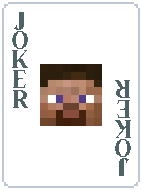
<style>
.page{position:relative;width:142px;height:190px;background:#ffffff}
.page>*{position:absolute;margin:0}
.t1{font:26px "StarCrushRegular";color:#4f6367}
</style>
<div class="page">
<p class="t1" style="left:13px;top:11px;width:12px;height:19px">J</p>
<p class="t1" style="left:12px;top:30px;width:16px;height:19px">O</p>
<p class="t1" style="left:12px;top:49px;width:16px;height:19px">K</p>
<p class="t1" style="left:13px;top:69px;width:13px;height:19px">E</p>
<p class="t1" style="left:13px;top:89px;width:15px;height:19px">R</p>
<p class="t1" style="left:115px;top:80px;width:15px;height:18px;rotate:180deg">R</p>
<p class="t1" style="left:117px;top:100px;width:13px;height:18px;rotate:180deg">E</p>
<p class="t1" style="left:115px;top:120px;width:16px;height:18px;rotate:180deg">K</p>
<p class="t1" style="left:115px;top:139px;width:16px;height:18px;rotate:180deg">O</p>
<p class="t1" style="left:119px;top:158px;width:10px;height:18px;rotate:180deg">J</p>
</div>
